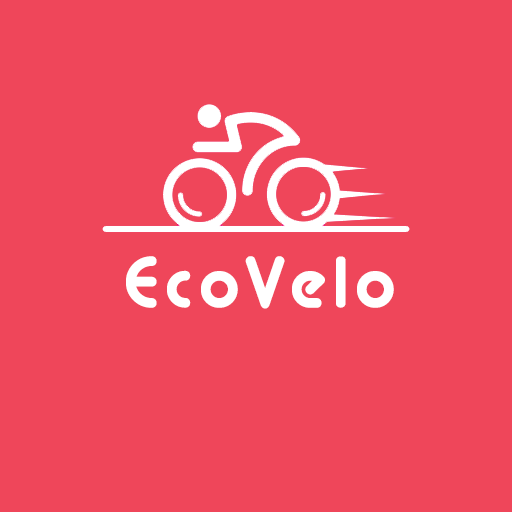
<style>
.page{position:relative;width:512px;height:512px;background:#ef465a}
.page>*{position:absolute;margin:0}
.t1{font:72px "Alba";letter-spacing:0.1em;color:#ffffff}
</style>
<div class="page">
<p class="t1" style="left:126px;top:256px;width:268px;height:53px">EcoVelo</p>
</div>
